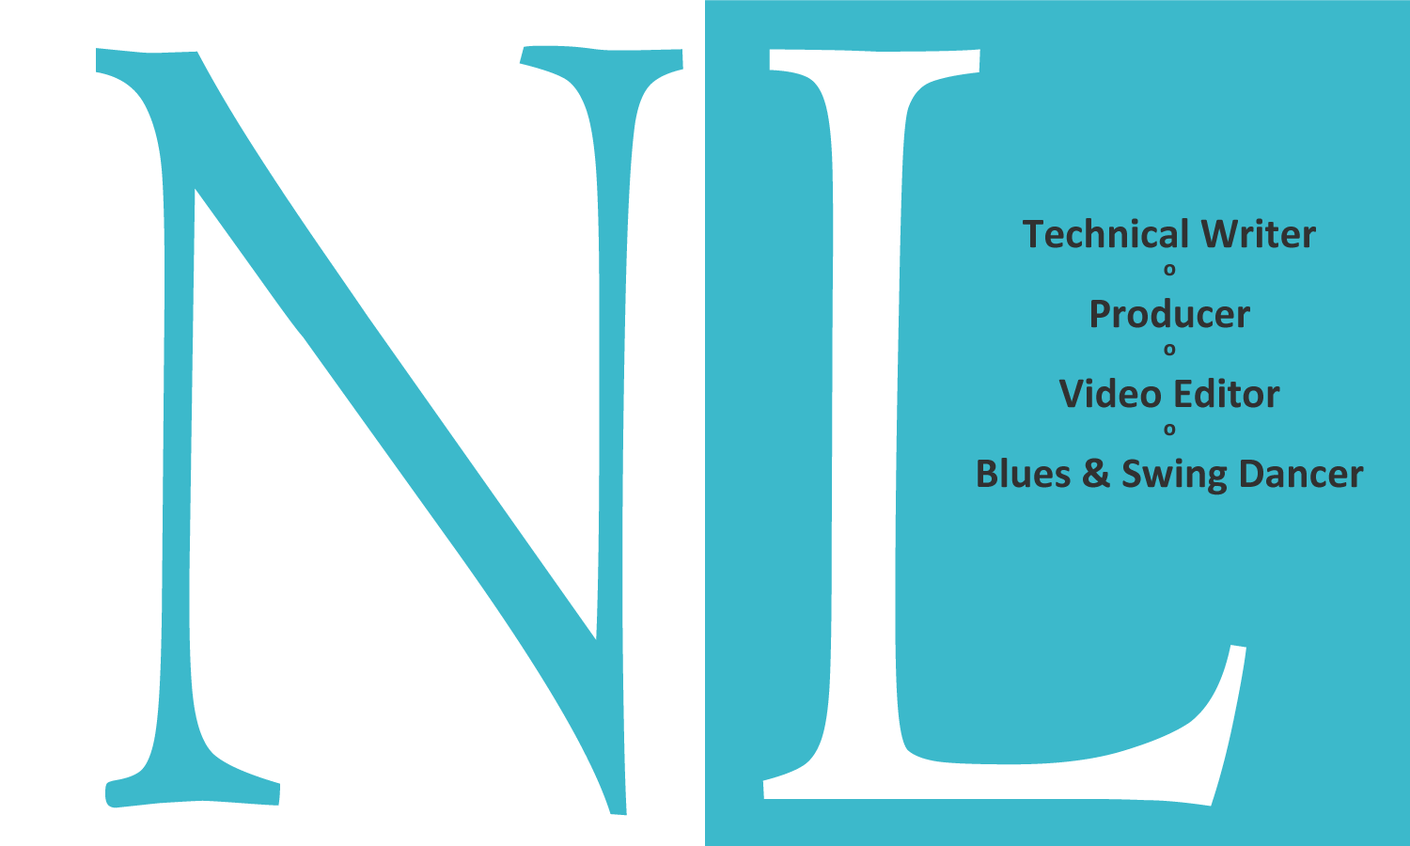
<style>
.page{position:relative;width:1410px;height:846px;background:#3cb9cb}
.page>*{position:absolute;margin:0}
.t1{font:1188.9px "Centaur";color:#3cb9cb;scale:0.67 1}
.t2{font:1193.3px "Centaur";color:#fffefe;scale:0.8 1}
.t3{font:43.1px "Calibri-Bold";color:#313131}
.t4{font:23.5px "Calibri-Bold";color:#313131}
</style>
<div class="page">
<p class="t1" style="left:96px;top:45px;width:587px;height:771px">N</p>
<p class="t2" style="left:762px;top:49px;width:484px;height:757px">L</p>
<p class="t3" style="left:977px;top:218px;width:387px;height:277px;text-align:center">Technical Writer<br><span class="t4">o<br></span>Producer<br><span class="t4">o<br></span>Video Editor<br><span class="t4">o<br></span>Blues &amp; Swing Dancer</p>
</div>
